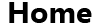
<style>
.page{position:relative;width:100px;height:25px;background:#ffffff}
.page>*{position:absolute;margin:0}
.t1{font:30px "Ebrima-Bold";color:#000000}
</style>
<div class="page">
<p class="t1" style="left:9px;top:2px;width:83px;height:21px">Home</p>
</div>
